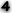
<style>
.page{position:relative;width:12px;height:13px}
.page>*{position:absolute;margin:0}
.t1{font:13.9px "K2D-ExtraBold";color:#000000}
</style>
<div class="page">
<p class="t1" style="left:1px;top:1px;width:9px;height:11px">4</p>
</div>
